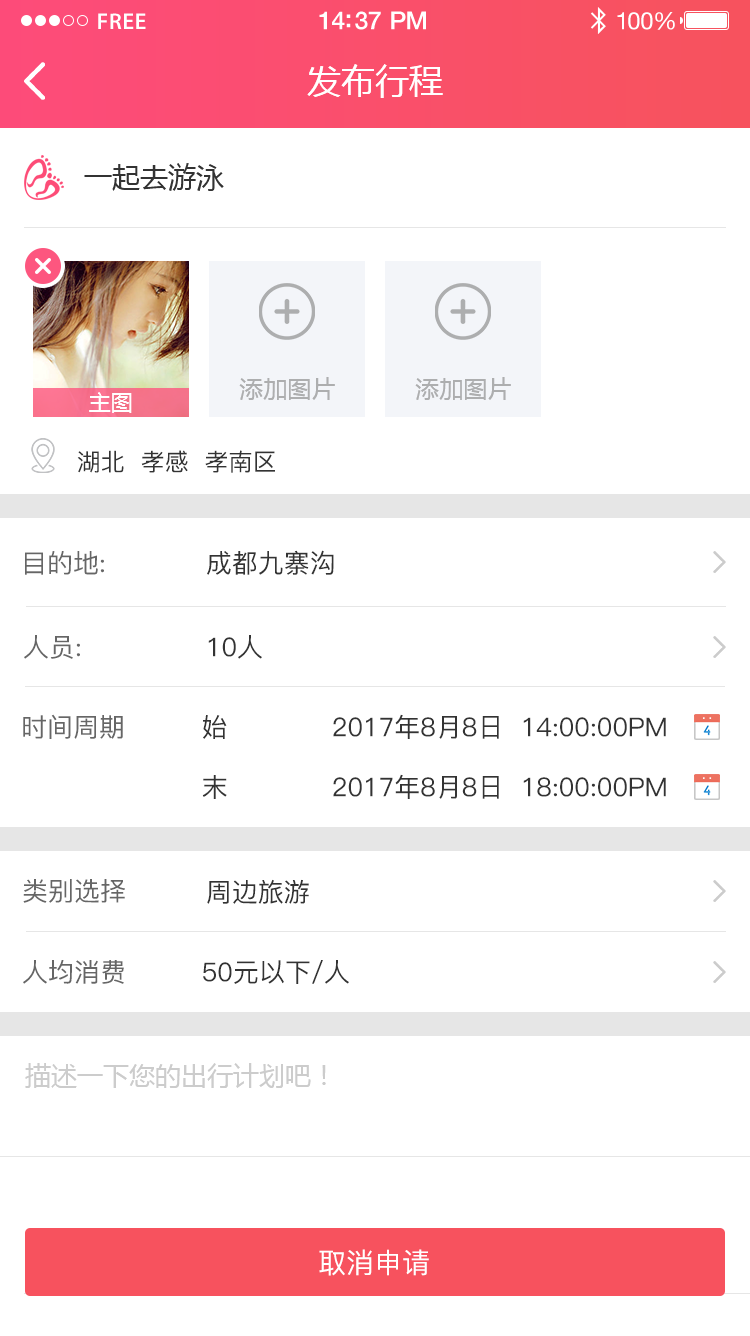
<style>
.page{position:relative;width:750px;height:1336px;background:#ffffff}
.page>*{position:absolute;margin:0}
.t1{font:23px "MyriadPro-Semibold";letter-spacing:0.02em;color:#ffffff}
.t2{font:25px "HelveticaNeue-Medium";letter-spacing:-0.02em;color:#ffffff}
.t3{font:24px "HelveticaNeue";letter-spacing:-0.02em;color:#ffffff}
.t4{font:34px "MicrosoftYaHei";color:#ffffff;text-transform:uppercase}
.t5{font:28px "MicrosoftYaHei";color:#333333;text-transform:uppercase}
.t6{font:24px "MicrosoftYaHei";color:#adaeaf;text-transform:uppercase}
.t7{font:22px "MicrosoftYaHei";color:#ffffff;text-transform:uppercase}
.t8{font:24px "PingFang-SC-Medium";color:#333333;text-transform:uppercase}
.t9{font:26px "PingFang-SC-Medium";color:#666666;text-transform:uppercase}
.t10{font:26px "PingFang-SC-Medium";color:#333333;text-transform:uppercase}
.t11{font:26px "MicrosoftYaHei";color:#cccccc;text-transform:uppercase}
.t12{font:28px "PingFang-SC-Medium";color:#ffffff;text-transform:uppercase}
</style>
<div class="page">
<p class="t1" style="left:98px;top:13px;width:48px;height:16px">FREE</p>
<p class="t2" style="left:319px;top:11px;width:107px;height:19px">14:37 PM</p>
<p class="t3" style="left:617px;top:12px;width:58px;height:18px">100%</p>
<p class="t4" style="left:307px;top:64px;width:136px;height:34px">发布行程</p>
<p class="t5" style="left:84px;top:163px;width:140px;height:28px">一起去游泳</p>
<p class="t6" style="left:239px;top:377px;width:96px;height:23px">添加图片</p>
<p class="t6" style="left:415px;top:377px;width:96px;height:23px">添加图片</p>
<p class="t7" style="left:89px;top:392px;width:43px;height:21px">主图</p>
<p class="t8" style="left:77px;top:450px;width:198px;height:23px">湖北  孝感  孝南区</p>
<p class="t9" style="left:25px;top:551px;width:79px;height:24px">目的地:</p>
<p class="t10" style="left:207px;top:550px;width:127px;height:25px">成都九寨沟</p>
<p class="t9" style="left:24px;top:635px;width:56px;height:24px">人员:</p>
<p class="t10" style="left:208px;top:635px;width:54px;height:24px">10人</p>
<p class="t9" style="left:23px;top:714px;width:100px;height:25px">时间周期</p>
<p class="t10" style="left:203px;top:715px;width:24px;height:24px">始</p>
<p class="t10" style="left:333px;top:714px;width:333px;height:25px">2017年8月8日  14:00:00PM</p>
<p class="t10" style="left:333px;top:774px;width:333px;height:25px">2017年8月8日  18:00:00PM</p>
<p class="t10" style="left:202px;top:775px;width:25px;height:24px">末</p>
<p class="t9" style="left:23px;top:879px;width:102px;height:24px">类别选择</p>
<p class="t10" style="left:207px;top:879px;width:102px;height:25px">周边旅游</p>
<p class="t9" style="left:23px;top:960px;width:101px;height:24px">人均消费</p>
<p class="t10" style="left:203px;top:960px;width:146px;height:24px">50元以下/人</p>
<p class="t11" style="left:25px;top:1063px;width:301px;height:25px">描述一下您的出行计划吧！</p>
<p class="t12" style="left:319px;top:1249px;width:110px;height:27px">取消申请</p>
</div>
